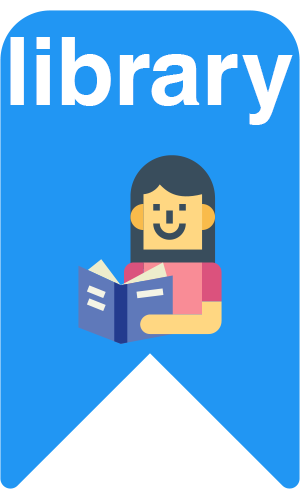
<style>
.page{position:relative;width:300px;height:500px;background:#2196f3}
.page>*{position:absolute;margin:0}
.t1{font:95px "HelveticaCE-Bold";color:#ffffff}
</style>
<div class="page">
<p class="t1" style="left:10px;top:37px;width:283px;height:88px">library</p>
</div>
